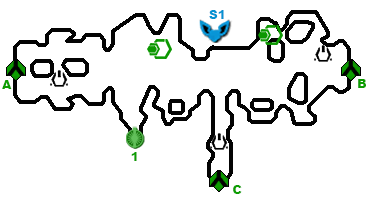
<style>
.page{position:relative;width:376px;height:200px;background:#ffffff}
.page>*{position:absolute;margin:0}
.t1{font:12px "Arial-Black";color:#0692d2}
.t2{font:12px "Arial-Black";color:#0d9e01}
</style>
<div class="page">
<p class="t1" style="left:209px;top:10px;width:15px;height:9px">S1</p>
<p class="t2" style="left:2px;top:80px;width:10px;height:9px">A</p>
<p class="t2" style="left:358px;top:79px;width:8px;height:9px">B</p>
<p class="t2" style="left:131px;top:152px;width:6px;height:9px">1</p>
<p class="t2" style="left:233px;top:185px;width:9px;height:9px">C</p>
</div>
